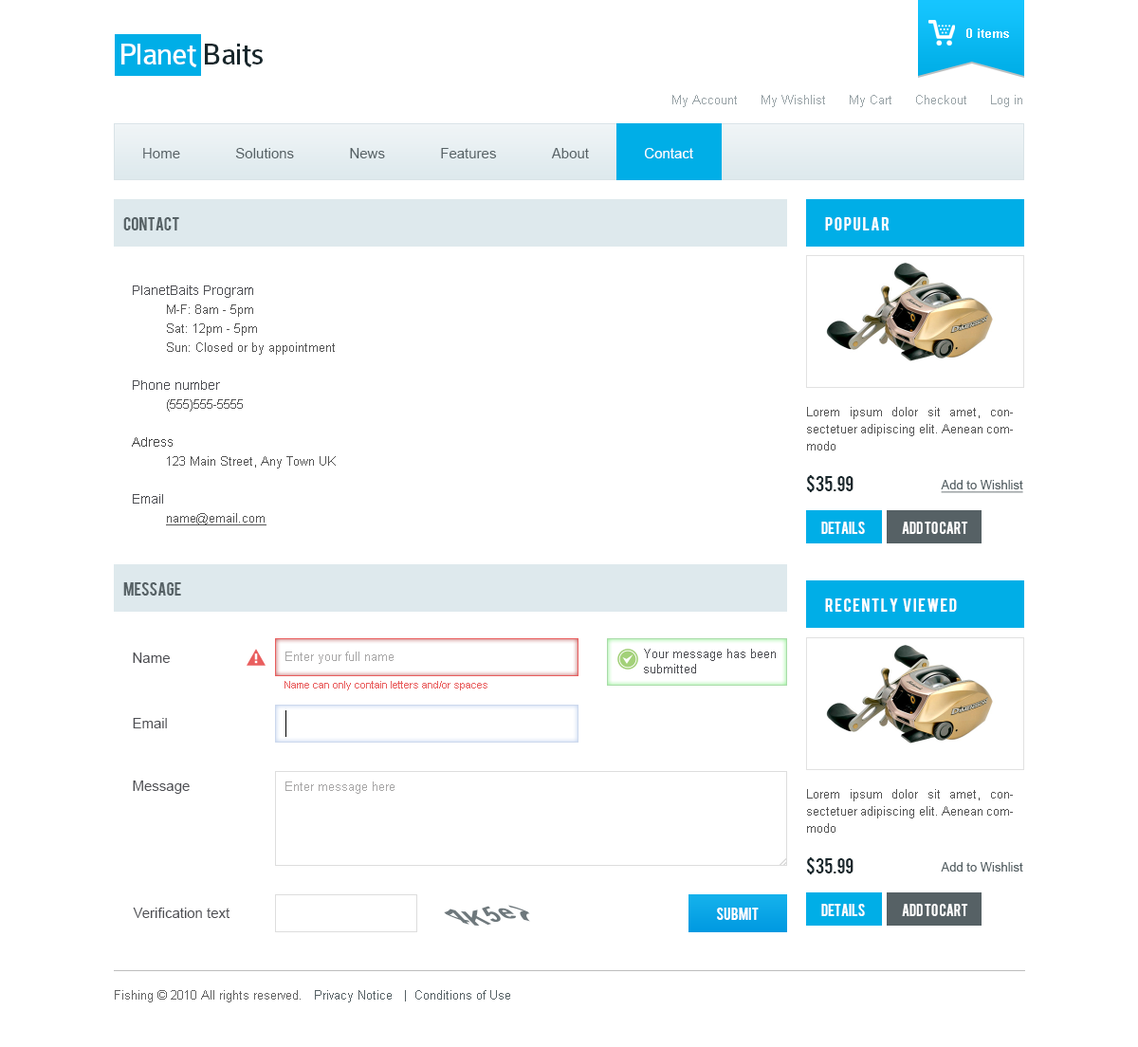
<style>
.page{position:relative;width:1138px;height:1047px;background:#ffffff}
.page>*{position:absolute;margin:0}
.t1{font:12.3px "Arial-BoldMT";color:#ffffff}
.t2{font:32.3px "Colaborate-Regular";letter-spacing:-0.04em;color:#ffffff}
.t3{font:32.3px "Colaborate-Regular";letter-spacing:-0.04em;color:#18272c}
.t4{font:12.3px "ArialMT";color:#99a3a7}
.t5{font:14.2px "ArialMT";color:#566165}
.t6{font:14.2px "ArialMT";color:#feffff}
.t7{font:15.2px "Bebas";color:#566165}
.t8{font:15.2px "Bebas";letter-spacing:0.1em;color:#ffffff;text-transform:uppercase}
.t9{font:12.3px/19px "ArialMT";color:#555555}
.t10{font:13.3px/19px "ArialMT";color:#4d4e53}
.t11{font:13.3px/19px "ArialMT";color:#464646}
.t12{font:12.3px/19px "ArialMT";color:#555555;text-decoration:underline}
.t13{font:12.3px/17.1px "ArialMT";color:#555555}
.t14{font:17.1px "Bebas";color:#18272c}
.t15{font:12.3px "ArialMT";color:#566165;text-decoration:underline}
.t16{font:13.3px "Bebas";color:#ffffff}
.t17{font:14.2px "ArialMT";color:#4d4e53}
.t18{font:12.3px "ArialMT";color:#a8a7a7}
.t19{font:12.3px "ArialMT";color:#4d4e53}
.t20{font:10.4px "ArialMT";color:#e95e5e}
.t21{font:12.3px "ArialMT";color:#566165}
.t22{font:26.2px "Arial-BoldMT";color:#6e787c;scale:1.25 1}
.t23{font:12.3px "ArialMT";color:#636363}
</style>
<div class="page">
<p class="t1" style="left:967px;top:28px;width:42px;height:10px">0 items</p>
<p class="t2" style="left:121px;top:44px;width:142px;height:23px">Planet <span class="t3">Baits</span></p>
<p class="t4" style="left:673px;top:95px;width:350px;height:12px">My Account      My Wishlist      My Cart      Checkout      Log in</p>
<p class="t5" style="left:143px;top:148px;width:551px;height:10px">Home              Solutions              News              Features              About              <span class="t6">Contact</span></p>
<p class="t7" style="left:123px;top:217px;width:56px;height:14px">Contact</p>
<p class="t8" style="left:825px;top:217px;width:65px;height:14px">Popular</p>
<p class="t9" style="left:132px;top:286px;width:204px;height:240px"><span class="t10">PlanetBaits Program<br> </span>M-F: 8am - 5pm<br> Sat: 12pm - 5pm<br> Sun: Closed or by appointment<br><br><span class="t10">Phone number<br> </span>(555)555-5555<br><br><span class="t11">Adress<br> </span>123 Main Street, Any Town UK<br><br><span class="t10">Email<br> </span><span class="t12">name@email.com</span></p>
<p class="t13" style="left:807px;top:407px;width:206px;height:44px;text-align:justify">Lorem ipsum dolor sit amet, consectetuer adipiscing elit. Aenean commodo</p>
<p class="t14" style="left:806px;top:475px;width:48px;height:17px">$35.99</p>
<p class="t15" style="left:941px;top:480px;width:83px;height:13px">Add to Wishlist</p>
<p class="t16" style="left:822px;top:522px;width:43px;height:12px">details</p>
<p class="t16" style="left:902px;top:522px;width:67px;height:12px">Add to cart</p>
<p class="t7" style="left:123px;top:583px;width:58px;height:13px">Message</p>
<p class="t8" style="left:825px;top:599px;width:132px;height:13px">Recently Viewed</p>
<p class="t17" style="left:133px;top:653px;width:37px;height:10px">Name</p>
<p class="t18" style="left:286px;top:652px;width:108px;height:12px">Enter your full name</p>
<p class="t19" style="left:644px;top:649px;width:132px;height:25px">Your message has been <br>submitted</p>
<p class="t20" style="left:285px;top:681px;width:203px;height:10px">Name can only contain letters and/or spaces</p>
<p class="t17" style="left:133px;top:718px;width:34px;height:11px">Email</p>
<p class="t17" style="left:133px;top:781px;width:57px;height:13px">Message</p>
<p class="t18" style="left:286px;top:782px;width:109px;height:12px">Enter message here</p>
<p class="t13" style="left:807px;top:789px;width:206px;height:44px;text-align:justify">Lorem ipsum dolor sit amet, consectetuer adipiscing elit. Aenean commodo</p>
<p class="t14" style="left:806px;top:858px;width:48px;height:17px">$35.99</p>
<p class="t21" style="left:941px;top:862px;width:83px;height:10px">Add to Wishlist</p>
<p class="t22" style="left:444px;top:905px;width:86px;height:22px;rotate:6deg">4K5e7</p>
<p class="t16" style="left:822px;top:904px;width:43px;height:12px">details</p>
<p class="t16" style="left:902px;top:904px;width:67px;height:12px">Add to cart</p>
<p class="t17" style="left:133px;top:908px;width:98px;height:10px">Verification text</p>
<p class="t16" style="left:717px;top:908px;width:42px;height:12px">SUBMIT</p>
<p class="t21" style="left:115px;top:990px;width:395px;height:13px"><span class="t23">Fishing © 2010 All rights reserved.   </span>Privacy Notice   |  Conditions of Use</p>
</div>
